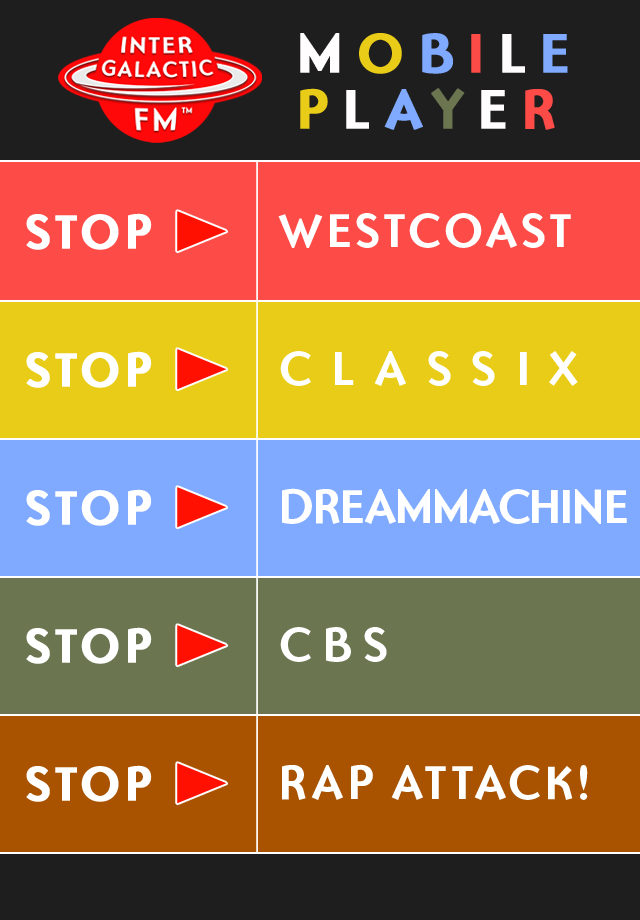
<style>
.page{position:relative;width:640px;height:920px;background:#1e1e1e}
.page>*{position:absolute;margin:0}
.t1{font:56px/56px "OttomatBold";letter-spacing:0.22em;color:#fffdfd;text-transform:uppercase;font-weight:bold}
.t2{font:56px/56px "OttomatBold";letter-spacing:0.22em;color:#e9cc18;text-transform:uppercase;font-weight:bold}
.t3{font:56px/56px "OttomatBold";letter-spacing:0.22em;color:#7faaff;text-transform:uppercase;font-weight:bold}
.t4{font:56px/56px "OttomatBold";letter-spacing:0.22em;color:#fd4b47;text-transform:uppercase;font-weight:bold}
.t5{font:56px/56px "OttomatBold";letter-spacing:0.22em;color:#6b7650;text-transform:uppercase;font-weight:bold}
.t6{font:48px "OttomatBold";letter-spacing:0.05em;color:#ffffff;text-transform:uppercase;font-weight:bold}
.t7{font:48px "OttomatBold";letter-spacing:0.05em;color:#ffffff;text-transform:uppercase}
.t8{font:48px "OttomatBold";letter-spacing:0.38em;color:#ffffff;text-transform:uppercase}
.t9{font:48px "OttomatBold";letter-spacing:-0.06em;color:#ffffff;text-transform:uppercase}
.t10{font:48px "OttomatBold";letter-spacing:0.2em;color:#ffffff;text-transform:uppercase}
</style>
<div class="page">
<p class="t1" style="left:300px;top:33px;width:268px;height:97px">m<span class="t2">o</span><span class="t3">b</span><span class="t4">i</span>l<span class="t3">e<br></span><span class="t2">p</span>l<span class="t3">a</span><span class="t5">y</span>e<span class="t4">r</span></p>
<p class="t6" style="left:26px;top:213px;width:126px;height:37px">stop</p>
<p class="t7" style="left:278px;top:213px;width:293px;height:35px">westcoast</p>
<p class="t6" style="left:26px;top:351px;width:126px;height:37px">stop</p>
<p class="t8" style="left:280px;top:351px;width:298px;height:35px">classix</p>
<p class="t6" style="left:26px;top:489px;width:126px;height:37px">stop</p>
<p class="t9" style="left:282px;top:488px;width:345px;height:36px">dreammachine</p>
<p class="t6" style="left:26px;top:627px;width:126px;height:37px">stop</p>
<p class="t10" style="left:280px;top:627px;width:107px;height:35px">cbs</p>
<p class="t6" style="left:26px;top:765px;width:126px;height:37px">stop</p>
<p class="t7" style="left:282px;top:764px;width:306px;height:36px">rap attack!</p>
</div>
